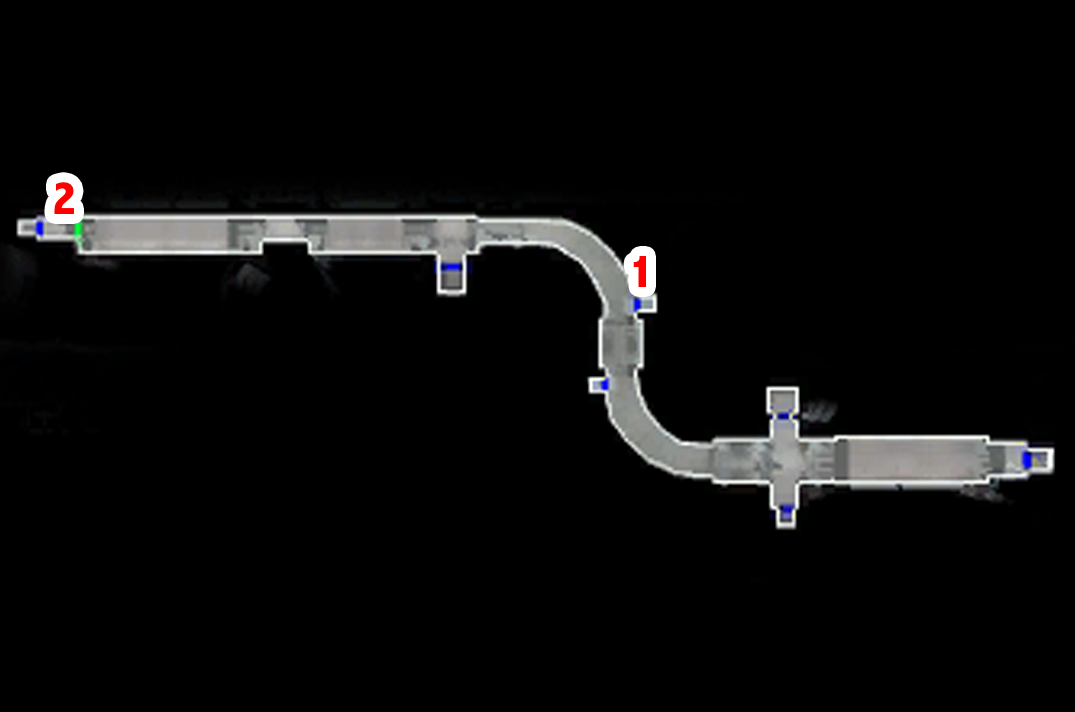
<style>
.page{position:relative;width:1075px;height:712px;background:#000000}
.page>*{position:absolute;margin:0}
.t1{font:48px "AbadiMT-CondensedExtraBold";color:#ff0000}
</style>
<div class="page">
<p class="t1" style="left:54px;top:182px;width:20px;height:32px">2</p>
<p class="t1" style="left:633px;top:256px;width:13px;height:31px">1</p>
</div>
